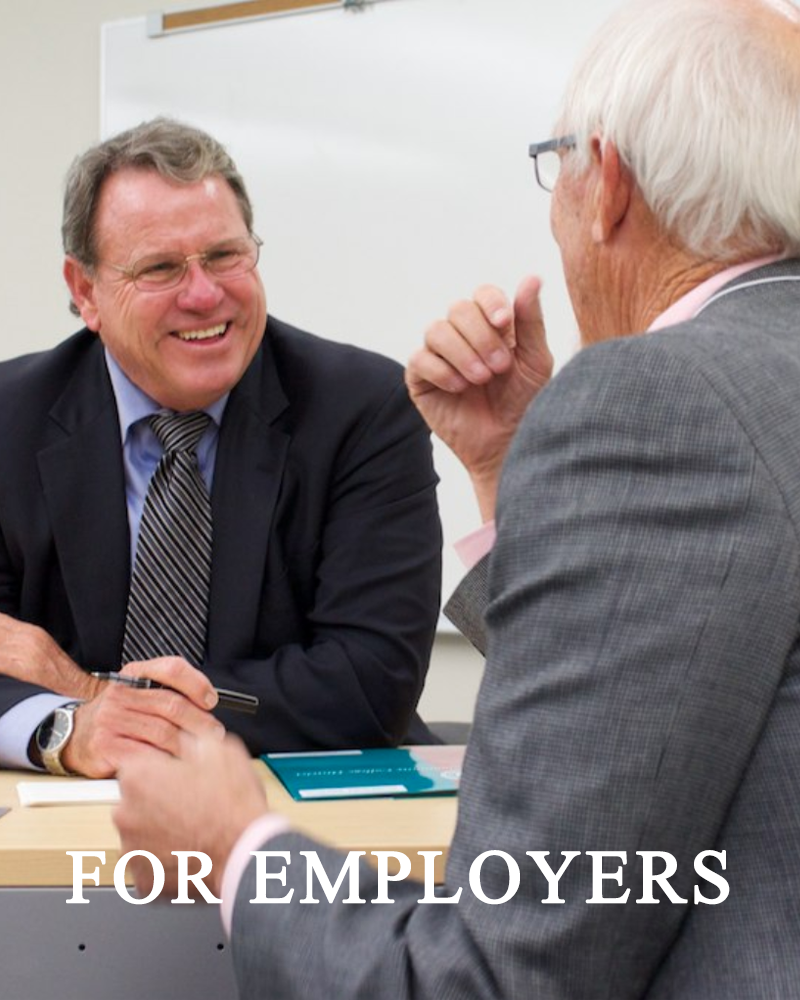
<style>
.page{position:relative;width:800px;height:1000px}
.page>*{position:absolute;margin:0}
.t1{font:75px "TimesNewRomanPSMT";letter-spacing:0.035em;color:#ffffff;text-transform:uppercase;font-weight:bold}
</style>
<div class="page">
<p class="t1" style="left:66px;top:850px;width:664px;height:55px">For EMPLOYERS</p>
</div>
